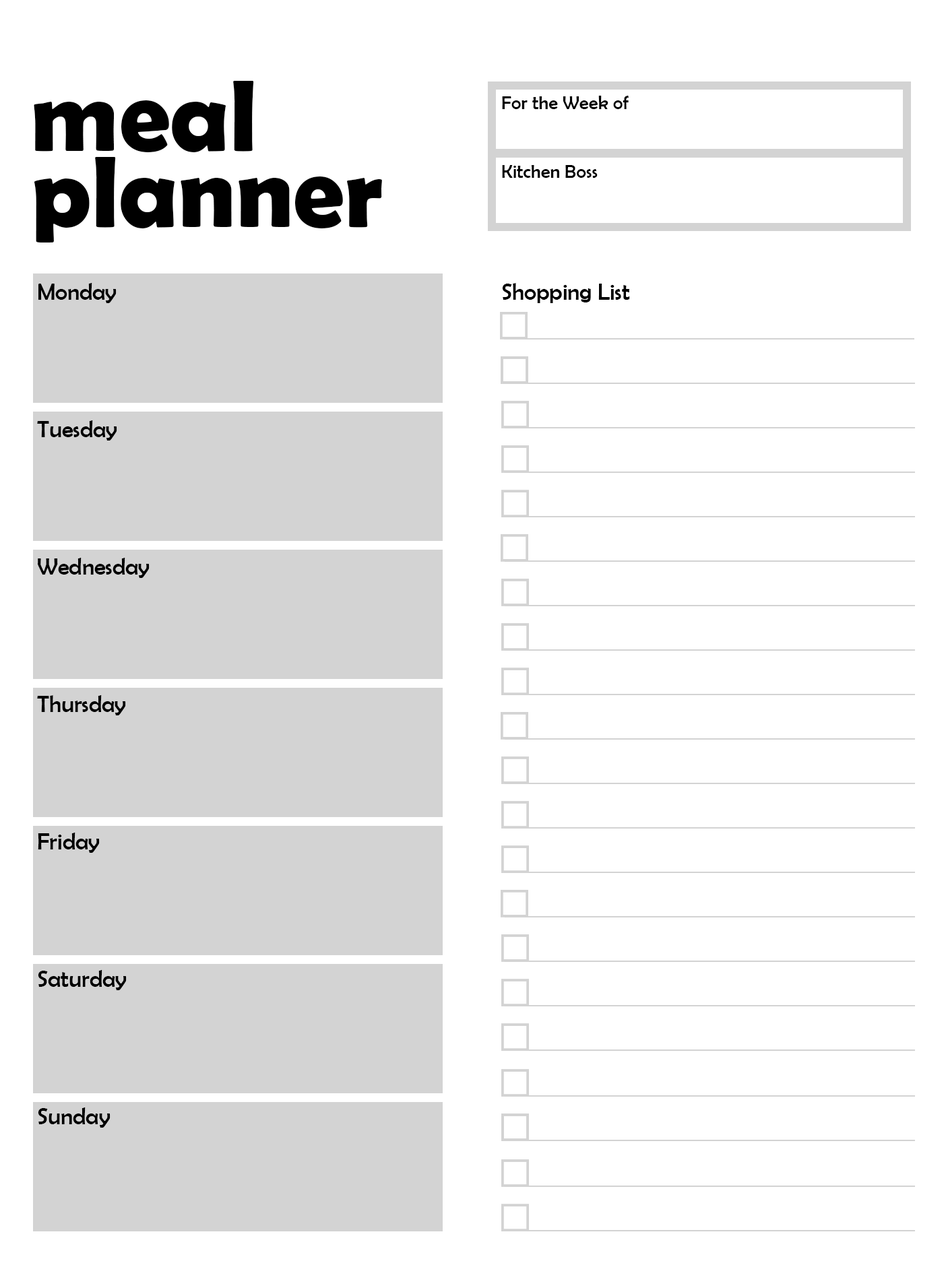
<style>
.page{position:relative;width:946px;height:1261px;background:#ffffff}
.page>*{position:absolute;margin:0}
.t1{font:101.5px/76.1px "BerlinSansFBDemi-Bold";color:#000000}
.t2{font:19px "BerlinSansFB-Reg";color:#000000}
.t3{font:23.3px/137.4px "BerlinSansFB-Reg";color:#000000}
.t4{font:23.3px "BerlinSansFB-Reg";color:#000000}
</style>
<div class="page">
<p class="t1" style="left:34px;top:81px;width:348px;height:161px">meal<br>planner</p>
<p class="t2" style="left:502px;top:96px;width:126px;height:13px">For the Week of</p>
<p class="t2" style="left:502px;top:165px;width:95px;height:13px">Kitchen Boss</p>
<p class="t3" style="left:37px;top:283px;width:113px;height:845px">Monday<br>Tuesday<br>Wednesday<br>Thursday<br>Friday<br>Saturday<br>Sunday</p>
<p class="t4" style="left:502px;top:283px;width:128px;height:20px">Shopping List</p>
</div>
